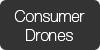
<style>
.page{position:relative;width:100px;height:50px;background:#333333}
.page>*{position:absolute;margin:0}
.t1{font:16px "HelveticaNeue-Thin";color:#ffffff}
</style>
<div class="page">
<p class="t1" style="left:14px;top:10px;width:71px;height:31px;text-align:center">Consumer<br>Drones</p>
</div>
